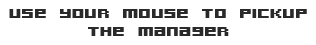
<style>
.page{position:relative;width:316px;height:45px;background:#ffffff}
.page>*{position:absolute;margin:0}
.t1{font:24px/18px "AcknowledgeTT-BRK-";color:#2a2a2a}
</style>
<div class="page">
<p class="t1" style="left:9px;top:9px;width:298px;height:27px;text-align:center">use your mouse to pickup<br>the manager</p>
</div>
